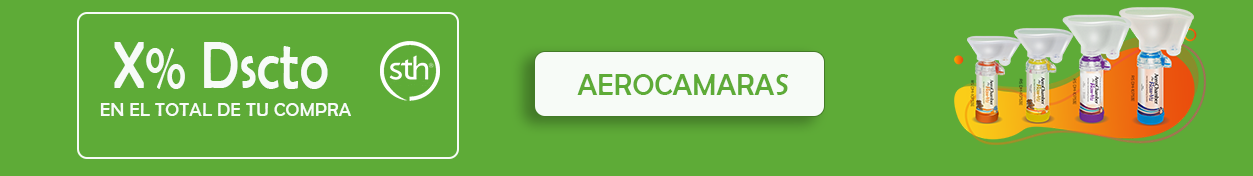
<style>
.page{position:relative;width:1253px;height:176px;background:#5eab37}
.page>*{position:absolute;margin:0}
.t1{font:67px "BerlinSansFB-Reg";letter-spacing:0.01em;color:#f7fbf7;scale:0.83 1}
.t2{font:30px "BerlinSansFB-Reg";letter-spacing:0.01em;color:#5eab37}
.t3{font:19.2px "BerlinSansFB-Reg";letter-spacing:0.01em;color:#f7fbf7}
</style>
<div class="page">
<p class="t1" style="left:114px;top:42px;width:214px;height:47px">X% Dscto</p>
<p class="t2" style="left:577px;top:74px;width:212px;height:21px">AEROCAMARAS</p>
<p class="t3" style="left:100px;top:103px;width:251px;height:13px">EN EL TOTAL DE TU COMPRA</p>
</div>
